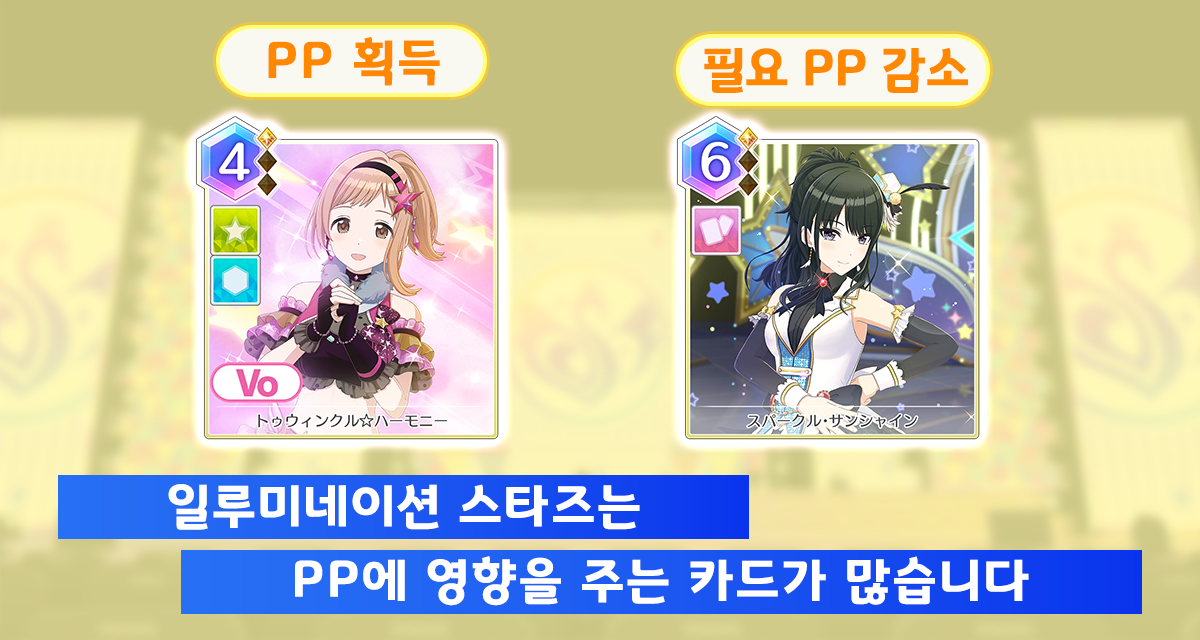
<style>
.page{position:relative;width:1200px;height:640px}
.page>*{position:absolute;margin:0}
.t1{font:50.7px "GyeonggiTitleB";letter-spacing:0.05em;color:#ff8800}
.t2{font:50.7px "GyeonggiTitleB";color:#ff8800}
.t3{font:50.7px "GyeonggiTitleB";letter-spacing:0.05em;color:#ffffff}
</style>
<div class="page">
<p class="t1" style="left:268px;top:37px;width:172px;height:49px">PP 획득</p>
<p class="t2" style="left:704px;top:47px;width:264px;height:46px">필요 PP 감소</p>
<p class="t3" style="left:168px;top:484px;width:472px;height:46px">일루미네이션 스타즈는</p>
<p class="t3" style="left:295px;top:556px;width:734px;height:50px">PP에 영향을 주는 카드가 많습니다</p>
</div>
